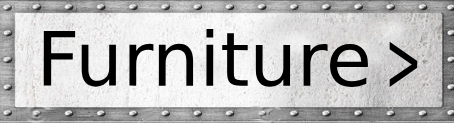
<style>
.page{position:relative;width:454px;height:123px}
.page>*{position:absolute;margin:0}
.t1{font:74.7px "DejaVuSans";color:#000000}
.t2{font:84.3px "DejaVuSans";color:#000000;scale:0.52 1}
</style>
<div class="page">
<p class="t1" style="left:43px;top:29px;width:325px;height:58px">Furniture</p>
<p class="t2" style="left:389px;top:41px;width:29px;height:46px">&gt;</p>
</div>
